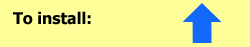
<style>
.page{position:relative;width:250px;height:47px;background:#ffff99}
.page>*{position:absolute;margin:0}
.t1{font:15.9px "Tahoma-Bold";color:#000000}
</style>
<div class="page">
<p class="t1" style="left:13px;top:11px;width:78px;height:14px">To install:</p>
</div>
